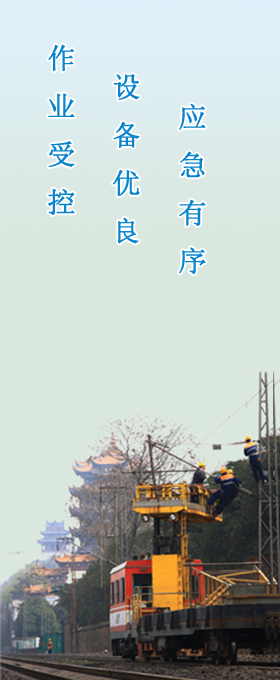
<style>
.page{position:relative;width:280px;height:680px;background:#dae7de}
.page>*{position:absolute;margin:0}
.t1{font:28px/48px "SimSun";color:#0984cd;font-weight:bold}
</style>
<div class="page">
<p class="t1" style="left:48px;top:44px;width:27px;height:171px">作<br>业<br>受<br>控</p>
<p class="t1" style="left:112px;top:74px;width:28px;height:170px">设<br>备<br>优<br>良</p>
<p class="t1" style="left:179px;top:103px;width:27px;height:172px">应<br>急<br>有<br>序</p>
</div>
